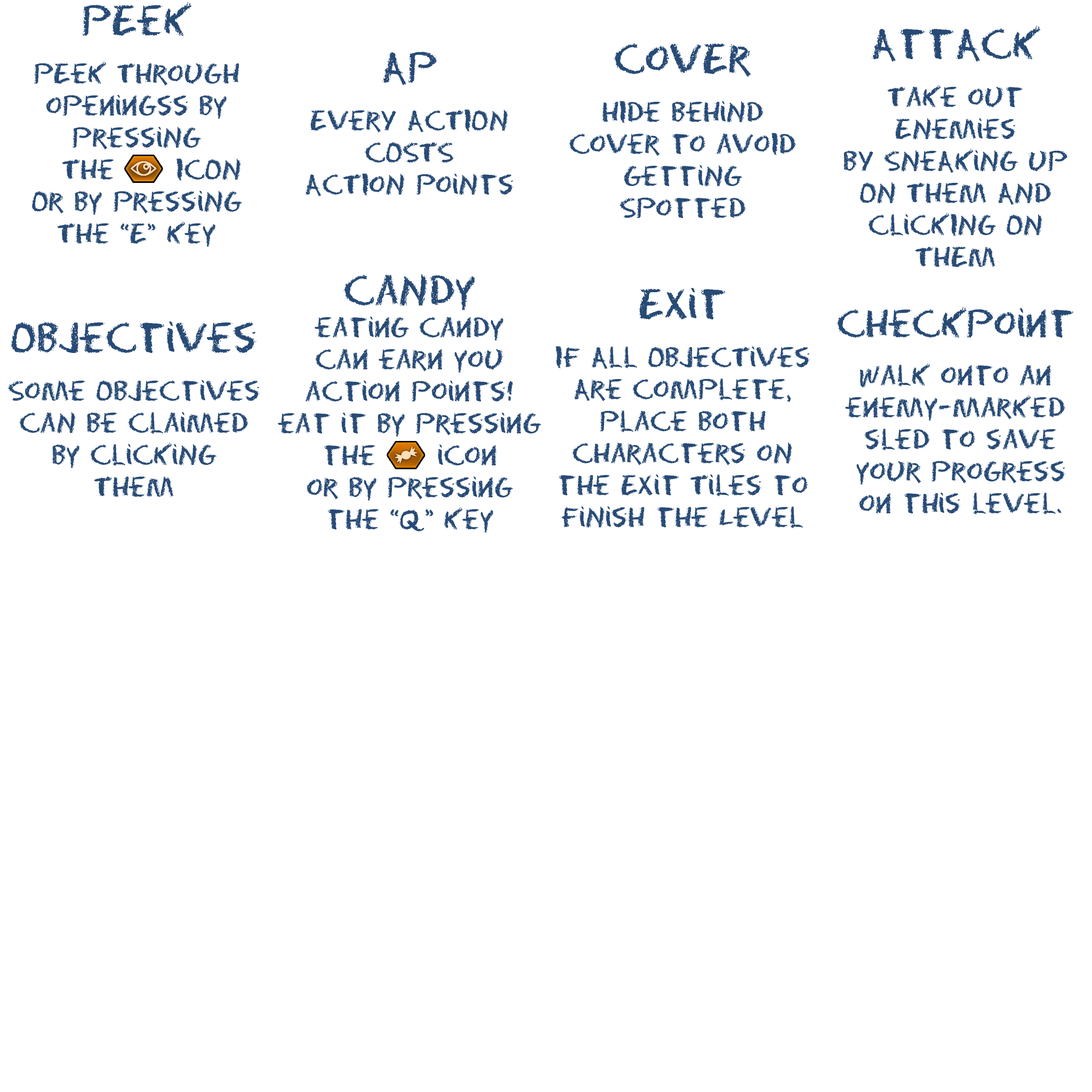
<style>
.page{position:relative;width:1092px;height:1092px;background:#ffffff}
.page>*{position:absolute;margin:0}
.t1{font:25.6px/16px "Eraser-Regular";color:#274a75}
.t2{font:38.4px/16px "Eraser-Regular";color:#274a75}
.t3{font:35.2px/16px "Eraser-Regular";color:#274a75}
</style>
<div class="page">
<p class="t1" style="left:32px;top:2px;width:210px;height:245px;text-align:center"><span class="t2">PEeK<br></span><br><br>PEek Through<br><br>openingss by <br><br>PressiNG<br><br>   The      ICON <br><br>Or By PressiNg<br><br>The “E” Key</p>
<p class="t1" style="left:844px;top:26px;width:223px;height:241px;text-align:center"><span class="t2">AttAck<br></span><br><br>Take oUt <br><br>ENemies<br><br>bY SNeAkiNG uP<br><br>ON Them ANd<br><br>CliCKING ON <br><br>THEM</p>
<p class="t1" style="left:305px;top:52px;width:209px;height:144px;text-align:center"><span class="t2">AP<br></span><br><br>EVerY ACTION<br><br>COSTS <br><br>AcTIoN PoiNts</p>
<p class="t1" style="left:569px;top:43px;width:227px;height:176px;text-align:center"><span class="t2">CovEr<br></span><br><br>HIde behiNd <br><br>cover to avoId<br><br>GettiNg <br><br>Spotted</p>
<p class="t1" style="left:278px;top:273px;width:263px;height:260px;text-align:center"><span class="t2">CaNdy<br></span><br>eating candy<br><br>can earn you<br><br>action points!<br><br>eat it by pressing <br><br>the      icon<br><br>or by pressing<br><br>the “Q” key</p>
<p class="t1" style="left:556px;top:288px;width:254px;height:240px;text-align:center"><span class="t2">Exit<br></span><br><br>If All ObjecTives<br><br>Are Complete, <br><br>Place Both<br><br>Characters oN<br><br>the Exit Tiles to<br><br>FiNish the Level</p>
<p class="t1" style="left:837px;top:307px;width:236px;height:208px;text-align:center"><span class="t3">Checkpoint<br></span><br><br>walk onto an <br><br>enemy-marked<br><br> sled to save<br><br> your progress<br><br> on this level.</p>
<p class="t1" style="left:8px;top:322px;width:252px;height:175px;text-align:center"><span class="t2">Objectives<br></span><br><br>Some Objectives<br><br>caN be ClaimeD<br><br>By ClickiNg <br><br>Them</p>
</div>
